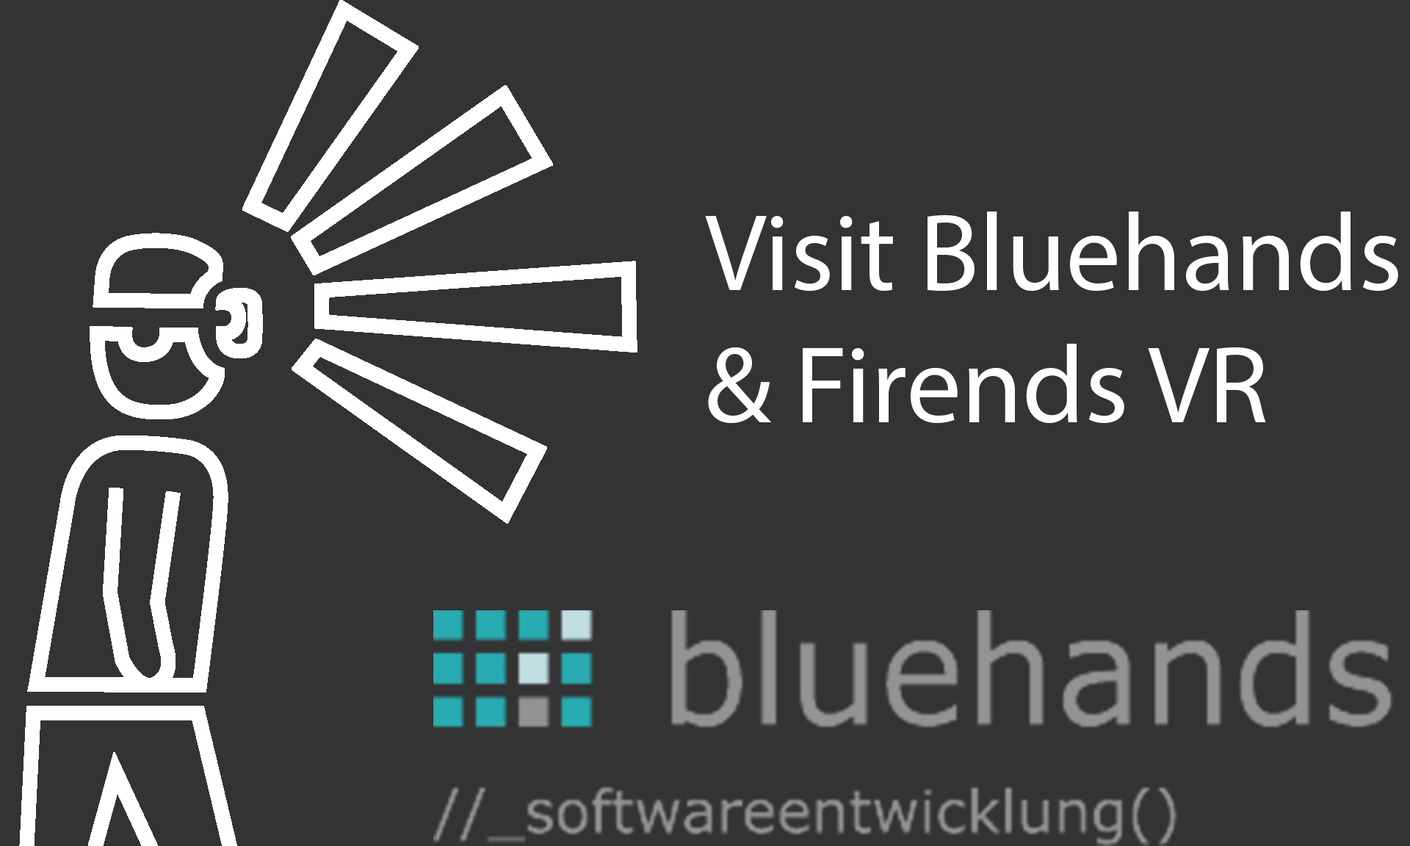
<style>
.page{position:relative;width:1410px;height:846px;background:#333333}
.page>*{position:absolute;margin:0}
.t1{font:110.1px "MyriadPro-Regular";color:#ffffff}
</style>
<div class="page">
<p class="t1" style="left:705px;top:211px;width:693px;height:213px">Visit Bluehands<br>&amp; Firends VR</p>
</div>
